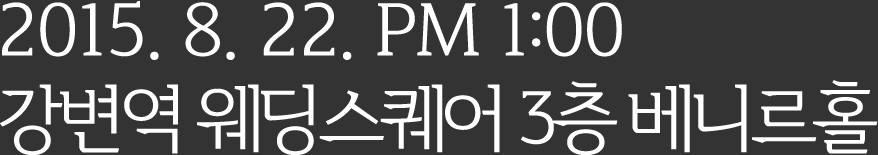
<style>
.page{position:relative;width:878px;height:155px;background:#333333}
.page>*{position:absolute;margin:0}
.t1{font:73.3px "Daehan";color:#ffffff}
.t2{font:73.3px "Daehan";letter-spacing:-0.075em;color:#ffffff}
</style>
<div class="page">
<p class="t1" style="left:0px;top:1px;width:878px;height:155px">2015. 8. 22. PM 1:00<br><span class="t2">강변역 웨딩스퀘어 3층 베니르홀</span></p>
</div>
